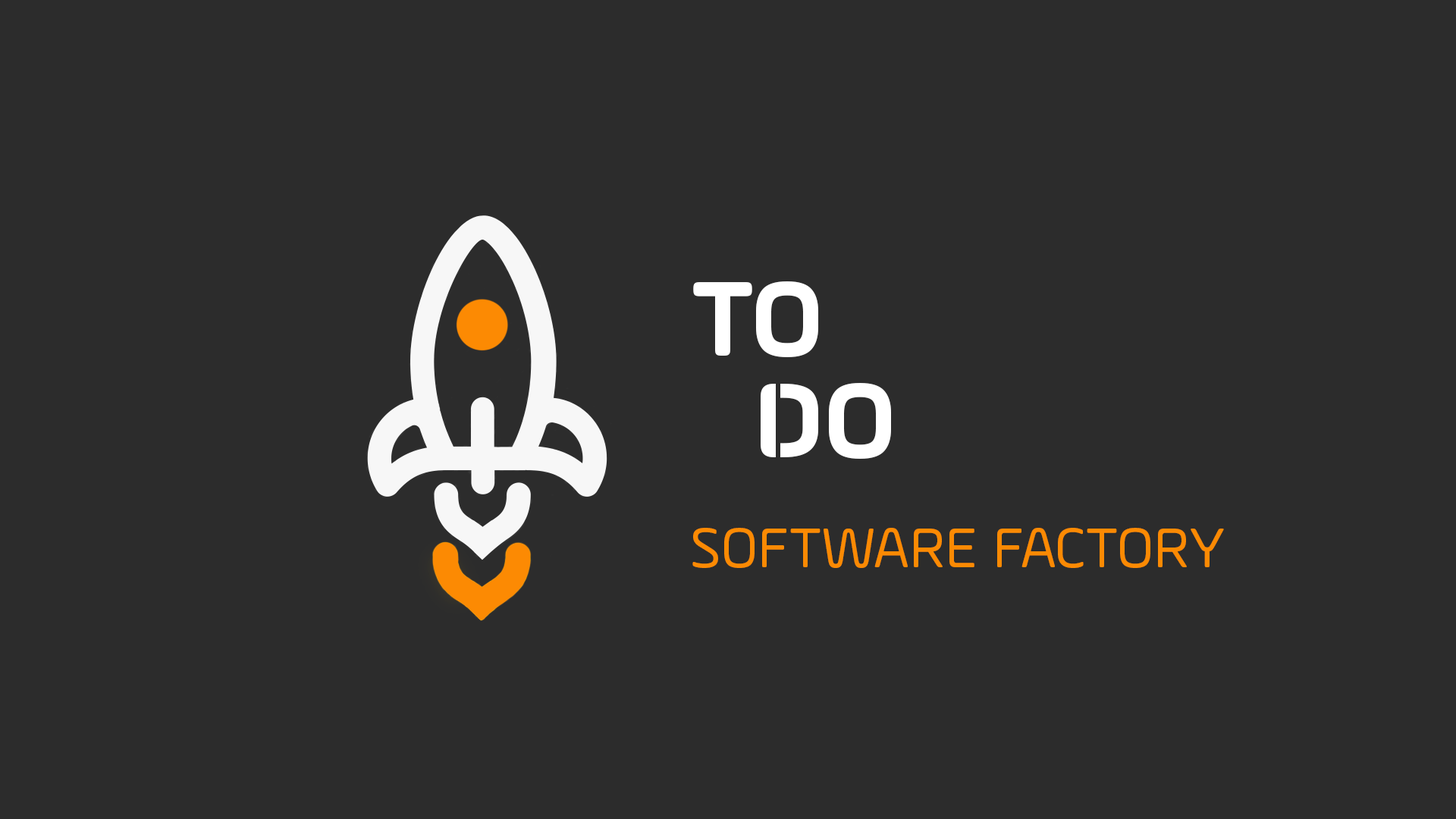
<style>
.page{position:relative;width:1456px;height:819px;background:#2c2c2c}
.page>*{position:absolute;margin:0}
.t1{font:113px "AmpleSoft-Bold";color:#ffffff;text-transform:uppercase}
.t2{font:59.1px "AmpleSoft";color:#fc8a03;text-transform:uppercase}
</style>
<div class="page">
<p class="t1" style="left:693px;top:281px;width:125px;height:76px">TO</p>
<p class="t1" style="left:761px;top:383px;width:130px;height:76px">DO</p>
<p class="t2" style="left:692px;top:528px;width:532px;height:40px">software factory</p>
</div>
